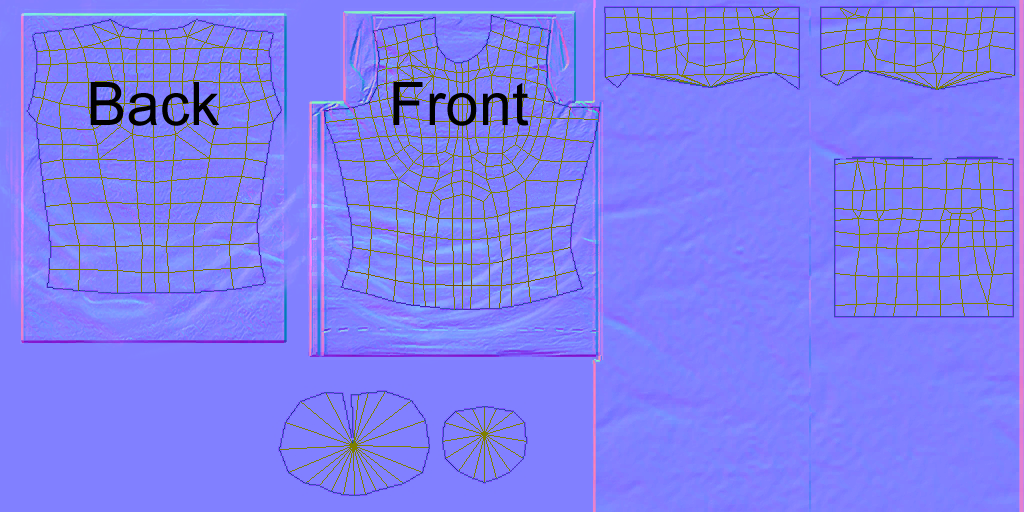
<style>
.page{position:relative;width:1024px;height:512px;background:#8180ff}
.page>*{position:absolute;margin:0}
.t1{font:60px "ArialMT";color:#000000}
</style>
<div class="page">
<p class="t1" style="left:90px;top:82px;width:439px;height:44px">Back     Front</p>
</div>
